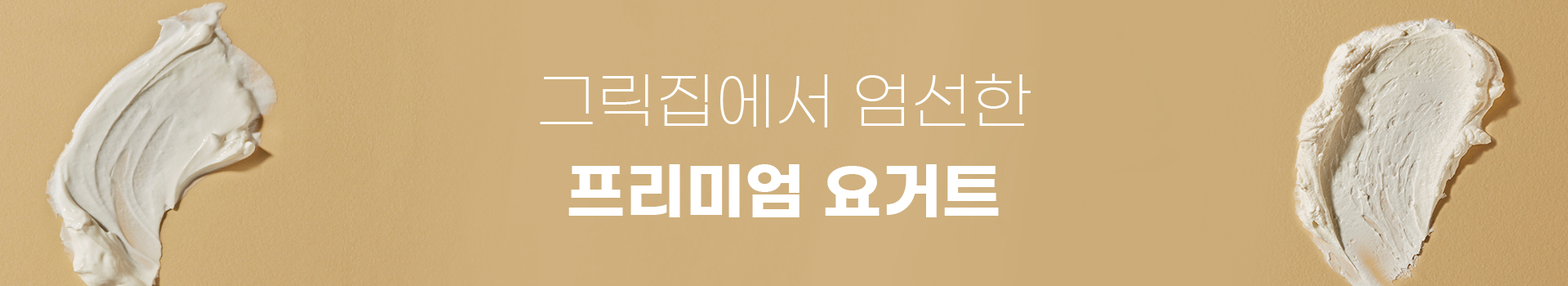
<style>
.page{position:relative;width:1568px;height:286px}
.page>*{position:absolute;margin:0}
.t1{font:62.1px/89.8px "GmarketSansTTFLight";color:#ffffff}
.t2{font:62.1px/89.8px "GmarketSansTTFBold";color:#ffffff}
</style>
<div class="page">
<p class="t1" style="left:540px;top:74px;width:491px;height:143px;text-align:center">그릭집에서 엄선한<br><span class="t2">프리미엄 요거트</span></p>
</div>
